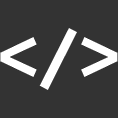
<style>
.page{position:relative;width:118px;height:118px;background:#333333}
.page>*{position:absolute;margin:0}
.t1{font:77.5px "Seravek-MediumItalic";color:#ffffff}
</style>
<div class="page">
<p class="t1" style="left:0px;top:28px;width:118px;height:62px">&lt;/&gt;</p>
</div>
